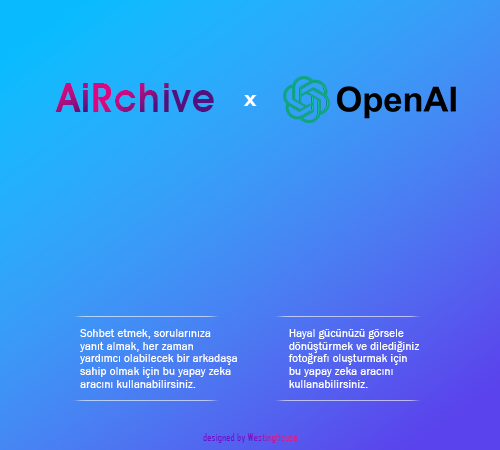
<style>
.page{position:relative;width:500px;height:450px}
.page>*{position:absolute;margin:0}
.t1{font:41.2px "AvantGardeITCbyBT-Demi";letter-spacing:0.04em;scale:0.91 1}
.t2{font:20.8px "AvantGardeITCbyBT-Demi";letter-spacing:0.04em;color:#ffffff;scale:1.2 1}
.t3{font:11.7px "FranklinGothic-Book";letter-spacing:0.04em;color:#ffffff;scale:0.91 1}
.t4{font:11.6px "FranklinGothic-Book";letter-spacing:0.04em;color:#ffffff;scale:0.91 1}
.t5{font:9.7px "AgencyFB-Reg";scale:1.18 1}
</style>
<div class="page">
<p class="t1" style="left:55px;top:83px;width:159px;height:29px">AiRchive</p>
<p class="t1" style="left:55px;top:83px;width:33px;height:29px">Ai</p>
<p class="t2" style="left:243px;top:95px;width:14px;height:11px">x</p>
<p class="t3" style="left:80px;top:329px;width:157px;height:59px">Sohbet etmek, sorularınıza <br>yanıt almak, her zaman <br>yardımcı olabilecek bir arkadaşa<br>sahip olmak için bu yapay zeka <br>aracını kullanabilirsiniz.</p>
<p class="t4" style="left:288px;top:329px;width:131px;height:59px">Hayal gücünüzü görsele <br>dönüştürmek ve dilediğiniz <br>fotoğrafı oluşturmak için <br>bu yapay zeka aracını <br>kullanabilirsiniz.</p>
<p class="t5" style="left:203px;top:433px;width:95px;height:10px">designed by WestingHouse</p>
</div>
